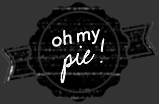
<style>
.page{position:relative;width:159px;height:104px;background:#333333}
.page>*{position:absolute;margin:0}
.t1{font:18px "Avenir-LightOblique";letter-spacing:-0.025em;color:#ffffff}
.t2{font:44px "BeerDip";letter-spacing:-0.025em;color:#ffffff}
</style>
<div class="page">
<p class="t1" style="left:52px;top:29px;width:48px;height:18px;rotate:-10deg">oh my</p>
<p class="t2" style="left:61px;top:38px;width:43px;height:45px;rotate:-10deg">pie !</p>
</div>
